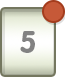
<style>
.page{position:relative;width:65px;height:77px}
.page>*{position:absolute;margin:0}
.t1{font:30px "RotondaC-Bold";letter-spacing:0.04em;color:#828282;text-transform:uppercase}
</style>
<div class="page">
<p class="t1" style="left:20px;top:31px;width:15px;height:22px">5</p>
</div>
